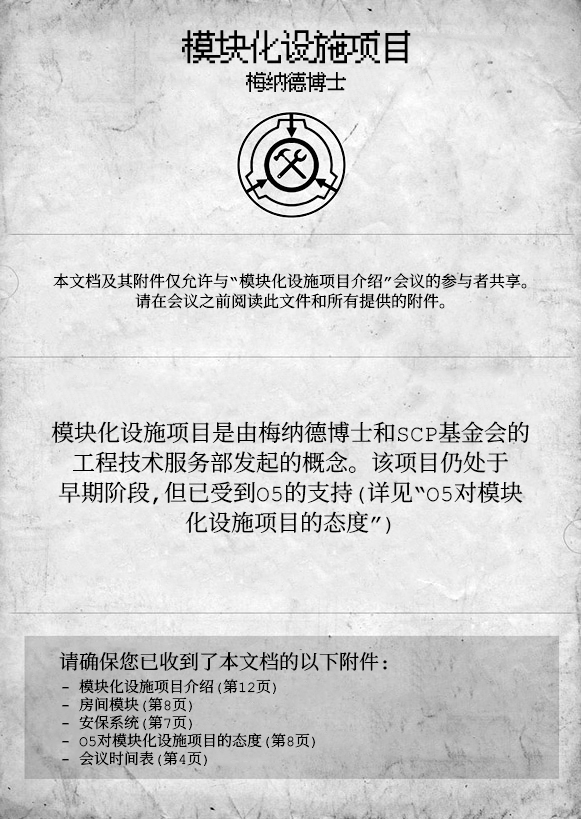
<style>
.page{position:relative;width:581px;height:819px}
.page>*{position:absolute;margin:0}
.t1{font:33px "VonwaonBitmap-12px";color:#000000}
.t2{font:20px "VonwaonBitmap-12px";color:#000000}
.t3{font:16px/10px "ContainmentBreach-Regular";color:#000000}
.t4{font:23px/30px "ContainmentBreach-Regular";color:#000000}
.t5{font:20px "ContainmentBreach-Regular";color:#000000}
.t6{font:15px/18px "ContainmentBreach-Regular";color:#000000}
</style>
<div class="page">
<p class="t1" style="left:182px;top:30px;width:229px;height:34px">模块化设施项目</p>
<p class="t2" style="left:246px;top:72px;width:100px;height:20px">梅纳德博士</p>
<p class="t3" style="left:53px;top:273px;width:474px;height:36px;text-align:center">本文档及其附件仅允许与“模块化设施项目介绍”会议的参与者共享。<br><br>请在会议之前阅读此文件和所有提供的附件。</p>
<p class="t4" style="left:51px;top:421px;width:478px;height:113px;text-align:center">模块化设施项目是由梅纳德博士和SCP基金会的<br>工程技术服务部发起的概念。该项目仍处于<br>早期阶段，但已受到O5的支持（详见“O5对模块<br>化设施项目的态度”）</p>
<p class="t5" style="left:59px;top:652px;width:328px;height:19px">请确保您已收到了本文档的以下附件：</p>
<p class="t6" style="left:62px;top:679px;width:253px;height:87px">- 模块化设施项目介绍（第12页）<br>- 房间模块（第8页）<br>- 安保系统（第7页）<br>- O5对模块化设施项目的态度（第8页）<br>- 会议时间表（第4页）</p>
</div>
